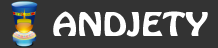
<style>
.page{position:relative;width:218px;height:48px;background:#333333}
.page>*{position:absolute;margin:0}
.t1{font:28.8px "HoboStd";color:#ffffff;scale:1.25 1}
</style>
<div class="page">
<p class="t1" style="left:53px;top:11px;width:155px;height:26px">ANDJETY</p>
</div>
